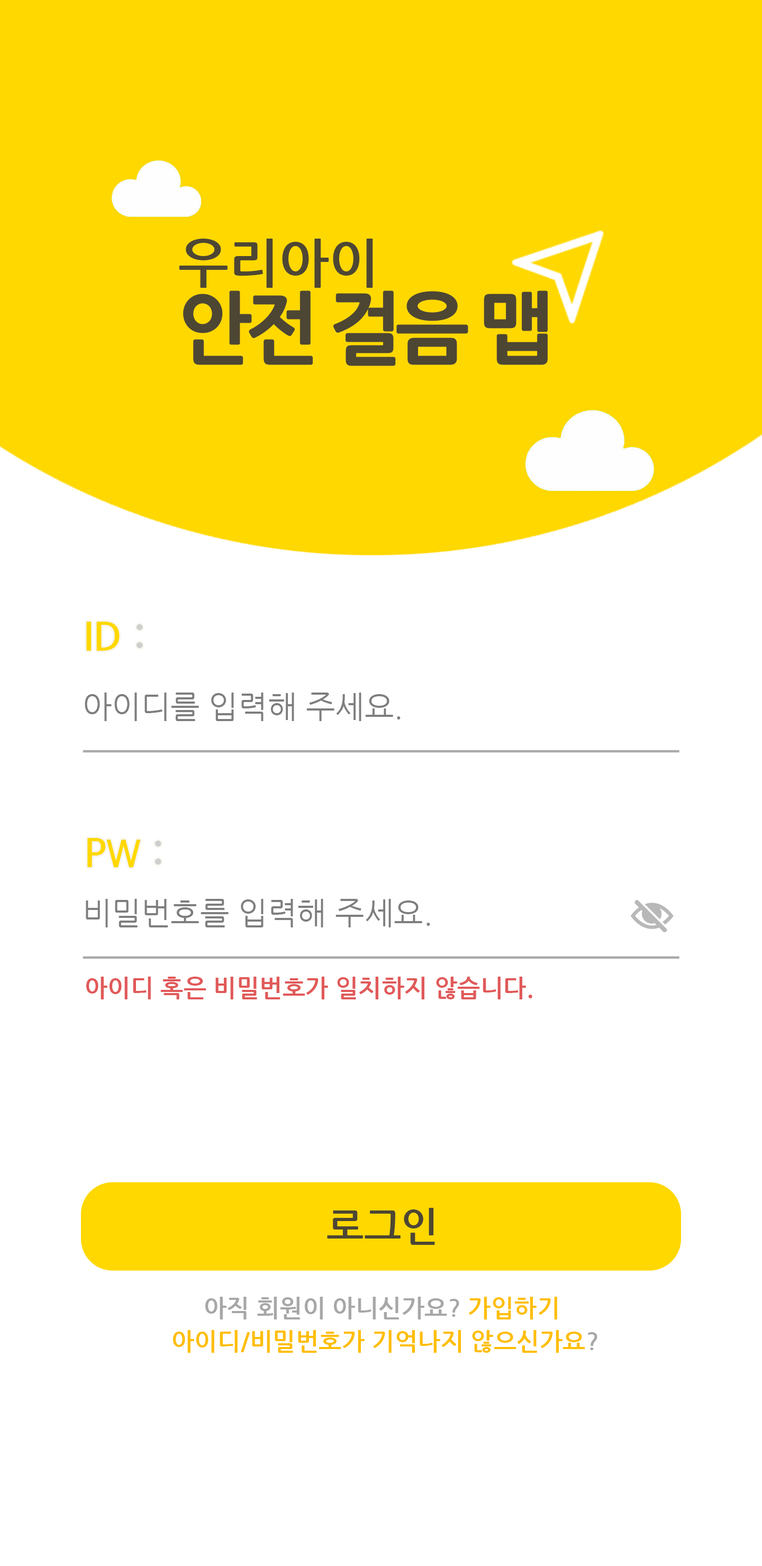
<style>
.page{position:relative;width:762px;height:1566px;background:#ffffff}
.page>*{position:absolute;margin:0}
.t1{font:77.5px/72.6px "NanumGothicBold";letter-spacing:-0.1em;color:#4d4633;font-weight:bold}
.t2{font:53.4px/72.6px "NanumGothicBold";color:#4d4633}
.t3{font:39.7px "NanumGothicBold";color:#ffd800}
.t4{font:39.7px "NanumGothicBold";color:#cfcfcf}
.t5{font:31.3px "NanumGothic";color:#7e7e7e}
.t6{font:36.9px "NanumGothicBold";color:#ffd800;scale:0.9 1}
.t7{font:24.5px "NanumGothicBold";color:#e15959}
.t8{font:39.7px "NanumGothicBold";color:#4d4633}
.t9{font:24.5px "NanumGothicBold";color:#a7a7a7}
.t10{font:24.5px "NanumGothicBold";color:#ffbe00}
</style>
<div class="page">
<p class="t1" style="left:179px;top:239px;width:368px;height:127px"><span class="t2">우리아이<br></span>안전 걸음 맵</p>
<p class="t3" style="left:86px;top:621px;width:57px;height:30px">ID <span class="t4">:</span></p>
<p class="t5" style="left:85px;top:692px;width:315px;height:29px">아이디를 입력해 주세요.</p>
<p class="t3" style="left:87px;top:838px;width:74px;height:29px">P<span class="t6">W </span><span class="t4">:</span></p>
<p class="t5" style="left:86px;top:899px;width:344px;height:28px">비밀번호를 입력해 주세요.</p>
<p class="t7" style="left:86px;top:976px;width:446px;height:23px">아이디 혹은 비밀번호가 일치하지 않습니다.</p>
<p class="t8" style="left:327px;top:1208px;width:108px;height:37px">로그인</p>
<p class="t9" style="left:205px;top:1296px;width:352px;height:23px">아직 회원이 아니신가요? <span class="t10">가입하기</span></p>
<p class="t10" style="left:173px;top:1330px;width:424px;height:22px">아이디/비밀번호가 기억나지 않으신가요<span class="t9">?</span></p>
</div>
